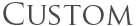
<style>
.page{position:relative;width:136px;height:26px;background:#ffffff}
.page>*{position:absolute;margin:0}
.t1{font:30px "TrajanPro-Regular";letter-spacing:-0.005em;color:#494949}
</style>
<div class="page">
<p class="t1" style="left:3px;top:2px;width:130px;height:23px">Custom</p>
</div>
